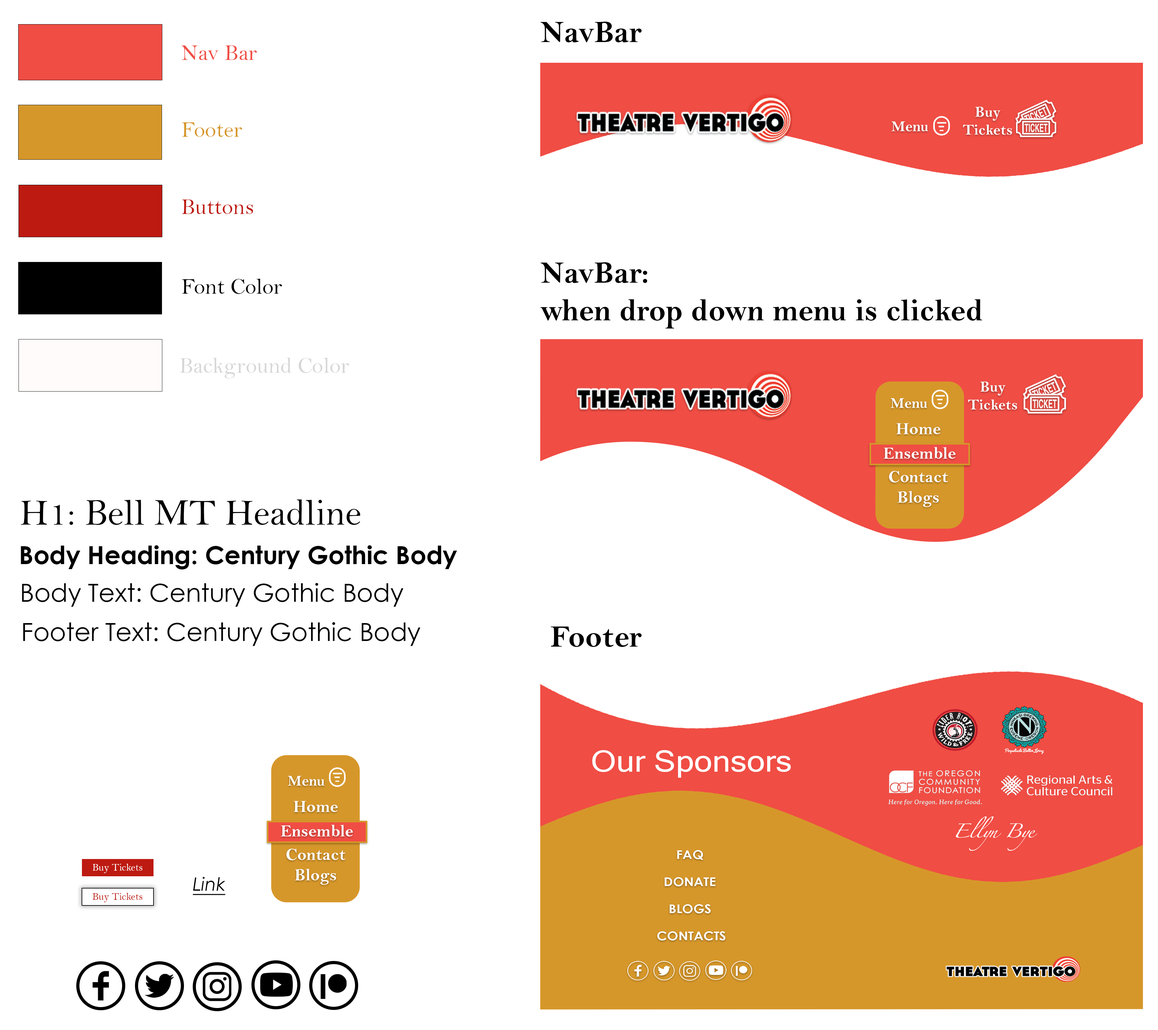
<style>
.page{position:relative;width:1158px;height:1030px;background:#ffffff}
.page>*{position:absolute;margin:0}
.t1{font:31.4px "BellMTBold";color:#000000}
.t2{font:22.6px "BellMT";color:#f04d44}
.t3{font:22.6px "BellMT";color:#d6972a}
.t4{font:22.6px "BellMT";color:#bd1a11}
.t5{font:22.6px "BellMT";color:#000000}
.t6{font:22.6px "BellMT";color:#d7d6d6}
.t7{font:37.5px "BellMT";color:#000000}
.t8{font:25px "CenturyGothic-Bold";color:#000000}
.t9{font:25px "CenturyGothic";color:#000000}
.t10{font:15.1px "BellMTBold";color:#ffffff}
.t11{font:17.3px "BellMTBold";color:#ffffff}
.t12{font:10.3px "BellMT";color:#ffffff}
.t13{font:18.3px "CenturyGothic-Italic";color:#000000;text-decoration:underline}
.t14{font:10.3px "BellMT";color:#bd1a11}
</style>
<div class="page">
<p class="t1" style="left:540px;top:22px;width:101px;height:20px">NavBar</p>
<p class="t2" style="left:181px;top:45px;width:76px;height:15px">Nav Bar</p>
<p class="t3" style="left:182px;top:122px;width:60px;height:15px">Footer</p>
<p class="t4" style="left:182px;top:200px;width:71px;height:14px">Buttons</p>
<p class="t1" style="left:540px;top:262px;width:442px;height:67px">NavBar: <br>when drop down menu is clicked</p>
<p class="t5" style="left:182px;top:279px;width:100px;height:15px">Font Color</p>
<p class="t6" style="left:180px;top:358px;width:169px;height:20px">Background Color</p>
<p class="t7" style="left:21px;top:500px;width:339px;height:25px">H1: Bell MT Headline</p>
<p class="t8" style="left:21px;top:545px;width:436px;height:25px">Body Heading: Century Gothic Body</p>
<p class="t9" style="left:22px;top:583px;width:381px;height:24px">Body Text: Century Gothic Body</p>
<p class="t9" style="left:23px;top:622px;width:397px;height:24px">Footer Text: Century Gothic Body</p>
<p class="t1" style="left:550px;top:627px;width:91px;height:20px">Footer</p>
<p class="t10" style="left:288px;top:776px;width:36px;height:10px">Menu</p>
<p class="t11" style="left:293px;top:801px;width:45px;height:11px">Home</p>
<p class="t11" style="left:281px;top:825px;width:72px;height:12px">Ensemble</p>
<p class="t11" style="left:286px;top:849px;width:59px;height:11px">Contact</p>
<p class="t12" style="left:93px;top:864px;width:49px;height:9px">Buy Tickets</p>
<p class="t11" style="left:295px;top:869px;width:41px;height:16px">Blogs</p>
<p class="t13" style="left:193px;top:877px;width:32px;height:18px">Link</p>
<p class="t14" style="left:93px;top:893px;width:49px;height:9px">Buy Tickets</p>
</div>
